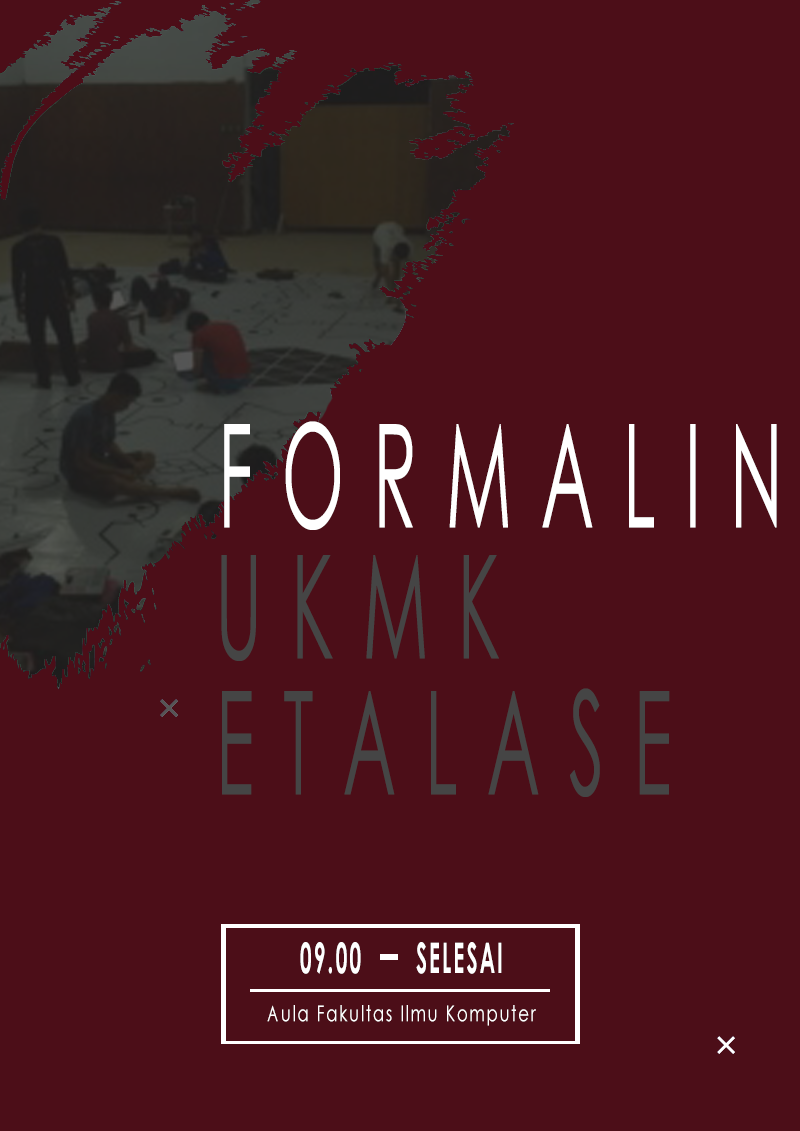
<style>
.page{position:relative;width:800px;height:1131px;background:#4c0e18}
.page>*{position:absolute;margin:0}
.t1{font:144px "CenturyGothic";letter-spacing:0.4em;color:#ffffff;scale:0.5 1}
.t2{font:144px "CenturyGothic";letter-spacing:0.4em;color:#454545;scale:0.5 1}
.t3{font:42px "CenturyGothic-Bold";letter-spacing:0.1em;color:#ffffff;scale:0.5 1}
.t4{font:22px "CenturyGothic";letter-spacing:0.1em;color:#ffffff;scale:0.75 1}
</style>
<div class="page">
<p class="t1" style="left:224px;top:421px;width:553px;height:109px">FORMALIN</p>
<p class="t2" style="left:221px;top:555px;width:278px;height:106px">UKMK</p>
<p class="t2" style="left:222px;top:688px;width:448px;height:109px">ETALASE</p>
<p class="t3" style="left:300px;top:942px;width:61px;height:32px">09.00</p>
<p class="t3" style="left:416px;top:942px;width:86px;height:32px">SELESAI</p>
<p class="t4" style="left:267px;top:1005px;width:269px;height:21px">Aula Fakultas Ilmu Komputer</p>
</div>
